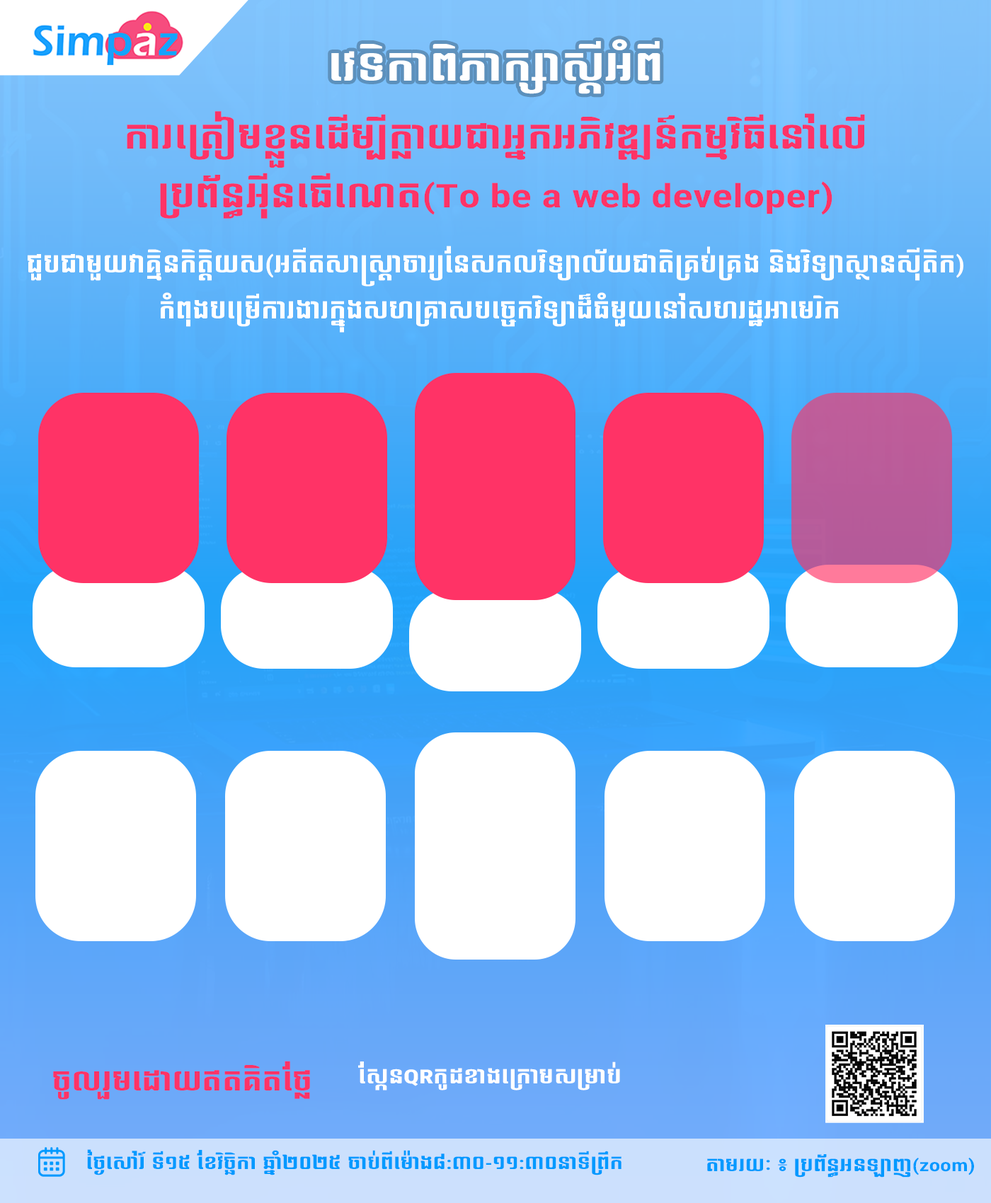
<style>
.page{position:relative;width:991px;height:1203px}
.page>*{position:absolute;margin:0}
.t1{font:37.7px "NiDA-Bayon";color:#ffffff;scale:1.32 1}
.t2{font:32.6px/59px "NiDA-Bayon";color:#ff3366;scale:1.32 1}
.t3{font:32.6px/59px "Roboto-CondensedSemiBold";color:#ff3366;scale:1.32 1}
.t4{font:23.6px/46px "NiDA-Bayon";color:#ffffff;scale:1.23 1}
.t5{font:23.6px/46px "Roboto-CondensedSemiBold";color:#ffffff;scale:1.23 1}
.t6{font:26px "NiDA-Bayon";color:#ff3366;scale:1.32 1}
.t7{font:19.5px "NiDA-Bayon";color:#ffffff;scale:1.32 1}
.t8{font:19.5px "Roboto-CondensedExtraBold";color:#ffffff;scale:1.32 1}
.t9{font:17px "NiDA-Bayon";color:#0099ff;scale:1.32 1}
.t10{font:17px "Roboto-CondensedSemiBold";color:#0099ff;scale:1.32 1}
</style>
<div class="page">
<p class="t1" style="left:331px;top:39px;width:329px;height:55px">វេទិកាពិភាក្សាស្តីអំពី</p>
<p class="t2" style="left:127px;top:111px;width:738px;height:108px;text-align:center">ការត្រៀមខ្លួនដើម្បីក្លាយជាអ្នកអភិវឌ្ឍន៍កម្មវិធីនៅលើ<br>ប្រព័ន្ធអ៊ីនធើណេត<span class="t3">(To be a web developer)</span></p>
<p class="t4" style="left:28px;top:246px;width:935px;height:87px;text-align:center">ជួបជាមួយវាគ្មិនកិតិ្តយស<span class="t5">(</span>អតីតសាស្ត្រាចារ្យនែសកលវិទ្យាល័យជាតិគ្រប់គ្រង និងវិទ្យាស្ថានស៊ីតិក<span class="t5">)<br></span> កំពុងបម្រើការងារក្នុងសហគ្រាសបច្ចេកវិទ្យាដ៏ធំមួយនៅសហរដ្ឋអាមេរិក</p>
<p class="t6" style="left:53px;top:1061px;width:257px;height:39px">ចូលរួមដោយឥតគិតថ្លែ</p>
<p class="t7" style="left:358px;top:1062px;width:262px;height:29px">ស្កែន<span class="t8">QR</span>កូដខាងក្រោមសម្រាប់</p>
<p class="t9" style="left:87px;top:1150px;width:534px;height:26px">ថ្ងៃសៅរ៍ ទី១៥ ខែវិច្ឆិកា ឆ្នាំ២០២៥ ចាប់ពីម៉ោង៨<span class="t10">:</span>៣០<span class="t10">-</span>១១<span class="t10">:</span>៣០នាទីព្រឹក</p>
<p class="t9" style="left:707px;top:1154px;width:267px;height:24px">តាមរយៈ ៖ ប្រព័ន្ធអនឡាញ<span class="t10">(zoom)​</span></p>
</div>
